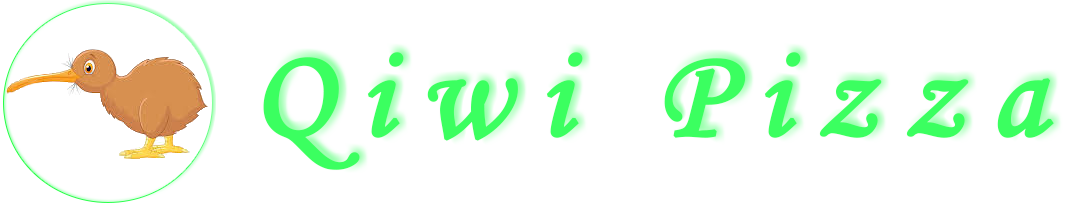
<style>
.page{position:relative;width:1071px;height:215px;background:#ffffff}
.page>*{position:absolute;margin:0}
.t1{font:130px "MonotypeCorsiva";letter-spacing:0.2em;color:#3bff60;font-weight:bold}
</style>
<div class="page">
<p class="t1" style="left:263px;top:52px;width:791px;height:118px">Qiwi Pizza</p>
</div>
